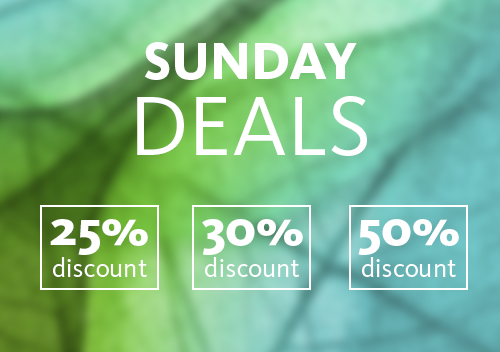
<style>
.page{position:relative;width:500px;height:352px}
.page>*{position:absolute;margin:0}
.t1{font:54.5px/76.5px "KievitOT-ExtraBold";color:#ffffff}
.t2{font:87.5px/76.5px "KievitOT-Regular";color:#ffffff}
.t3{font:26.9px "KievitOT-Regular";color:#ffffff}
.t4{font:52.4px "KievitOT-ExtraBold";color:#ffffff}
</style>
<div class="page">
<p class="t1" style="left:137px;top:42px;width:230px;height:114px;text-align:center">SUNDAY<br><span class="t2">DEALS</span></p>
<p class="t3" style="left:50px;top:219px;width:98px;height:58px;text-align:center"><span class="t4">25%<br></span>discount</p>
<p class="t3" style="left:202px;top:219px;width:101px;height:58px;text-align:center"><span class="t4">30%<br></span>discount</p>
<p class="t3" style="left:358px;top:219px;width:101px;height:58px;text-align:center"><span class="t4">50%<br></span>discount</p>
</div>
